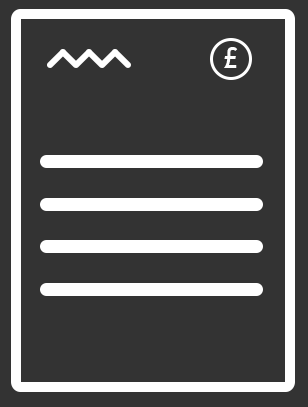
<style>
.page{position:relative;width:308px;height:407px;background:#333333}
.page>*{position:absolute;margin:0}
.t1{font:30px "Cabin-Medium";color:#ffffff}
</style>
<div class="page">
<p class="t1" style="left:224px;top:47px;width:14px;height:21px">£</p>
</div>
